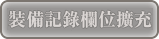
<style>
.page{position:relative;width:159px;height:39px}
.page>*{position:absolute;margin:0}
.t1{font:18px "RyuminPr6N-ExBold";color:#dbd6d4}
</style>
<div class="page">
<p class="t1" style="left:8px;top:10px;width:144px;height:18px">裝備記錄欄位擴充</p>
</div>
